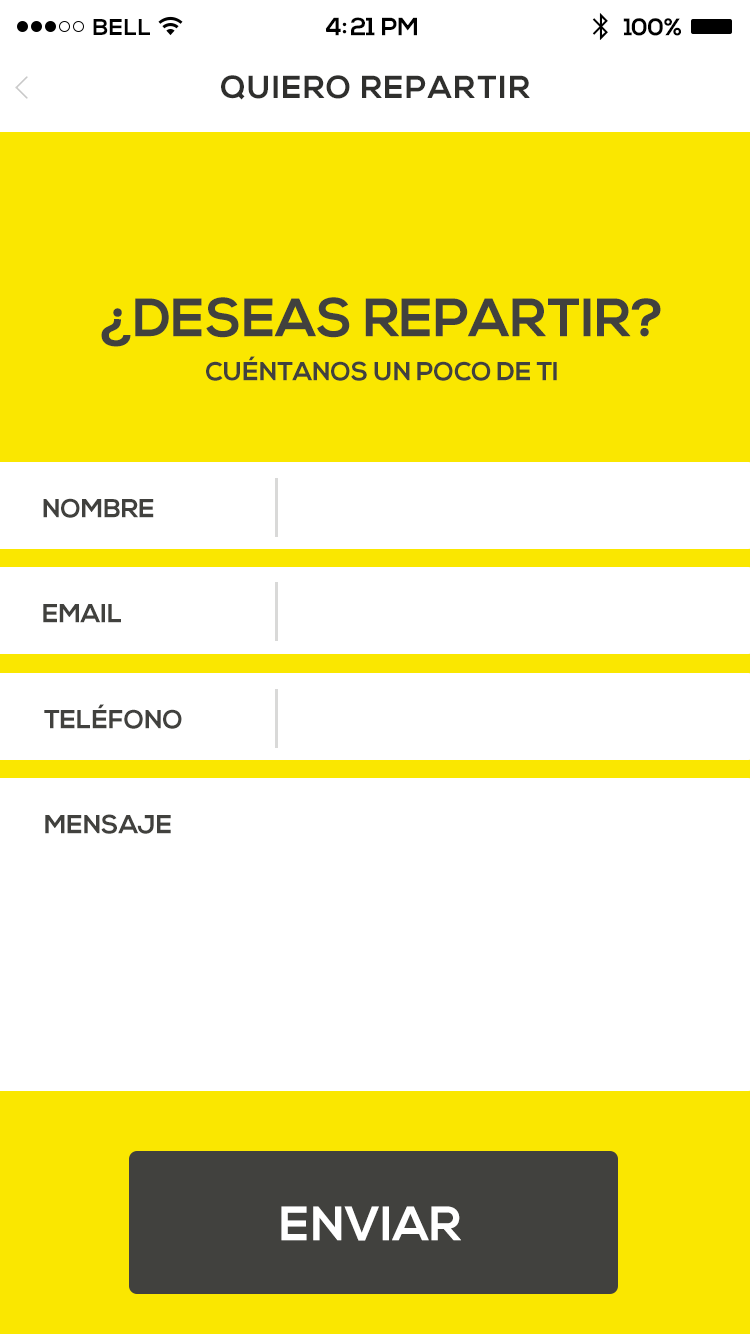
<style>
.page{position:relative;width:750px;height:1334px;background:#ffffff}
.page>*{position:absolute;margin:0}
.t1{font:25px "NexaBold";letter-spacing:-0.02em;color:#000000}
.t2{font:23px "NexaBold";letter-spacing:0.02em;color:#000000}
.t3{font:24px "NexaBold";letter-spacing:-0.02em;color:#000000}
.t4{font:31.7px "NexaBold";letter-spacing:0.05em;color:#2f2f2d}
.t5{font:54px "NexaBold";color:#41413e}
.t6{font:26px "NexaBold";color:#41413e}
.t7{font:48px "NexaBold";color:#ffffff}
</style>
<div class="page">
<p class="t1" style="left:325px;top:17px;width:92px;height:19px">4:21 PM</p>
<p class="t2" style="left:93px;top:19px;width:57px;height:16px">BELL</p>
<p class="t3" style="left:623px;top:18px;width:58px;height:18px">100%</p>
<p class="t4" style="left:221px;top:75px;width:309px;height:25px">QUIERO REPARTIR</p>
<p class="t5" style="left:101px;top:297px;width:560px;height:50px">¿DESEAS REPARTIR?</p>
<p class="t6" style="left:206px;top:356px;width:351px;height:25px">CUÉNTANOS UN POCO DE TI</p>
<p class="t6" style="left:43px;top:498px;width:111px;height:20px">NOMBRE</p>
<p class="t6" style="left:43px;top:604px;width:78px;height:19px">EMAIL</p>
<p class="t6" style="left:44px;top:704px;width:138px;height:25px">TELÉFONO</p>
<p class="t6" style="left:45px;top:814px;width:126px;height:20px">MENSAJE</p>
<p class="t7" style="left:281px;top:1206px;width:180px;height:35px">ENVIAR</p>
</div>
